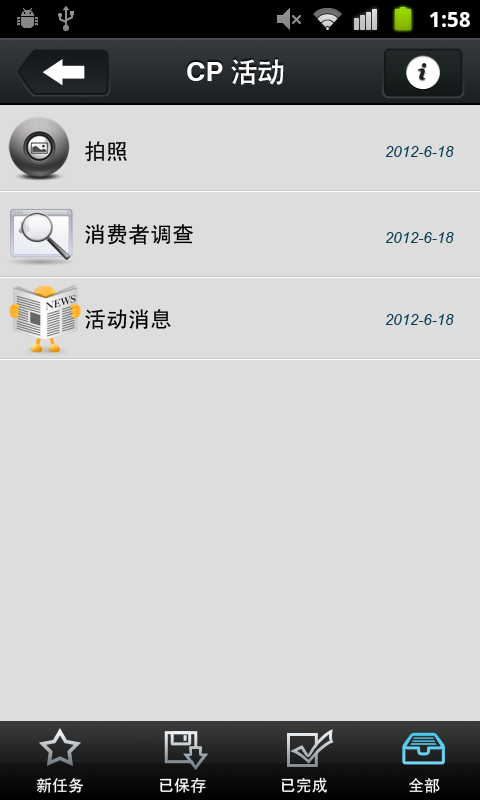
<style>
.page{position:relative;width:480px;height:800px;background:#dddddd}
.page>*{position:absolute;margin:0}
.t1{font:27px "CTCuHeiSJ";color:#ffffff}
.t2{font:22px "SimHei";color:#000000}
.t3{font:15px "Arial-ItalicMT";color:#0e4054}
.t4{font:16px "SimHei";color:#ffffff}
</style>
<div class="page">
<p class="t1" style="left:187px;top:59px;width:97px;height:26px">CP活动</p>
<p class="t2" style="left:85px;top:141px;width:42px;height:21px">拍照</p>
<p class="t3" style="left:385px;top:146px;width:69px;height:11px">2012-6-18</p>
<p class="t2" style="left:85px;top:224px;width:108px;height:21px">消费者调查</p>
<p class="t3" style="left:385px;top:232px;width:69px;height:11px">2012-6-18</p>
<p class="t2" style="left:85px;top:309px;width:86px;height:21px">活动消息</p>
<p class="t3" style="left:385px;top:314px;width:69px;height:11px">2012-6-18</p>
<p class="t4" style="left:36px;top:778px;width:47px;height:15px">新任务</p>
<p class="t4" style="left:160px;top:778px;width:46px;height:15px">已保存</p>
<p class="t4" style="left:281px;top:777px;width:46px;height:16px">已完成</p>
<p class="t4" style="left:409px;top:778px;width:31px;height:15px">全部</p>
</div>
